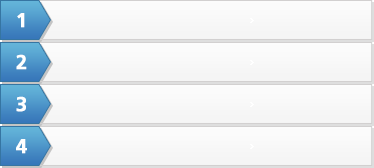
<style>
.page{position:relative;width:374px;height:168px}
.page>*{position:absolute;margin:0}
.t1{font:20px "Frutiger-Bold";color:#ffffff;font-weight:bold}
</style>
<div class="page">
<p class="t1" style="left:17px;top:13px;width:8px;height:15px">1</p>
<p class="t1" style="left:16px;top:54px;width:11px;height:16px">2</p>
<p class="t1" style="left:16px;top:96px;width:10px;height:16px">3</p>
<p class="t1" style="left:16px;top:139px;width:11px;height:15px">4</p>
</div>
